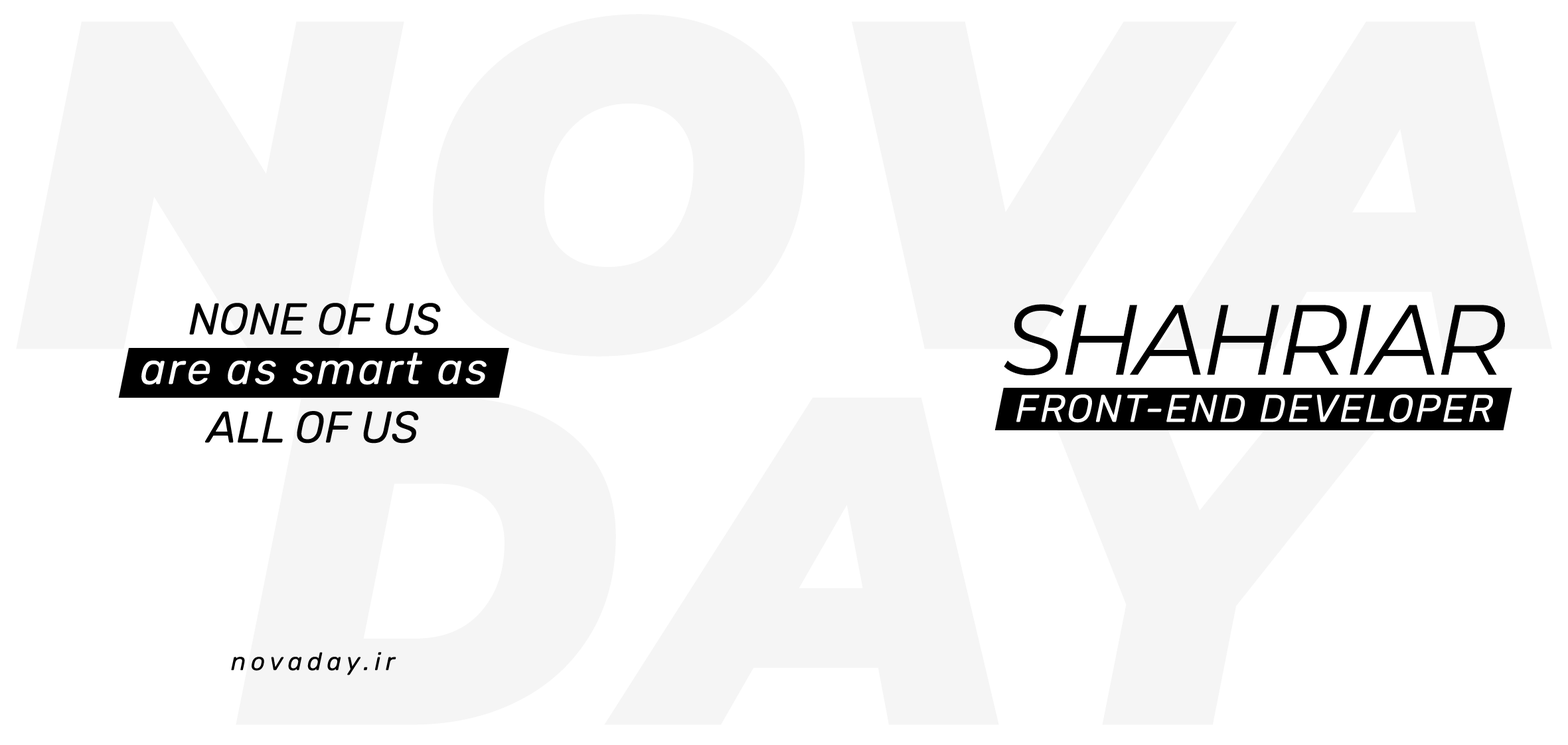
<style>
.page{position:relative;width:1568px;height:745px;background:#ffffff}
.page>*{position:absolute;margin:0}
.t1{font:44.3px "Rubik-Italic";color:#000000}
.t2{font:99.6px "Montserrat-Italic";letter-spacing:-0.05em;color:#000000}
.t3{font:44.3px "Rubik-Italic";letter-spacing:0.05em;color:#ffffff}
.t4{font:38.7px "Rubik-Italic";letter-spacing:0.05em;color:#ffffff}
.t5{font:24.9px "Rubik-Italic";letter-spacing:0.2em;color:#000000}
</style>
<div class="page">
<p class="t1" style="left:189px;top:303px;width:252px;height:32px">NONE OF US</p>
<p class="t2" style="left:1004px;top:304px;width:501px;height:72px">SHAHRIAR</p>
<p class="t3" style="left:141px;top:353px;width:346px;height:32px">are as smart as</p>
<p class="t4" style="left:1016px;top:394px;width:477px;height:29px">FRONT-END DEVELOPER</p>
<p class="t1" style="left:205px;top:411px;width:214px;height:32px">ALL OF US</p>
<p class="t5" style="left:231px;top:652px;width:165px;height:23px">novaday.ir</p>
</div>
